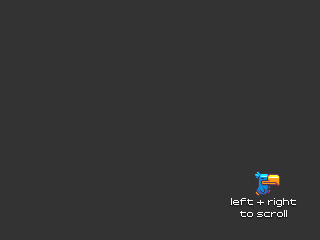
<style>
.page{position:relative;width:320px;height:240px;background:#333333}
.page>*{position:absolute;margin:0}
.t1{font:8px/12px "FFFDreamer";color:#ffffff}
</style>
<div class="page">
<p class="t1" style="left:231px;top:198px;width:65px;height:19px;text-align:center">left + right<br>to scroll</p>
</div>
